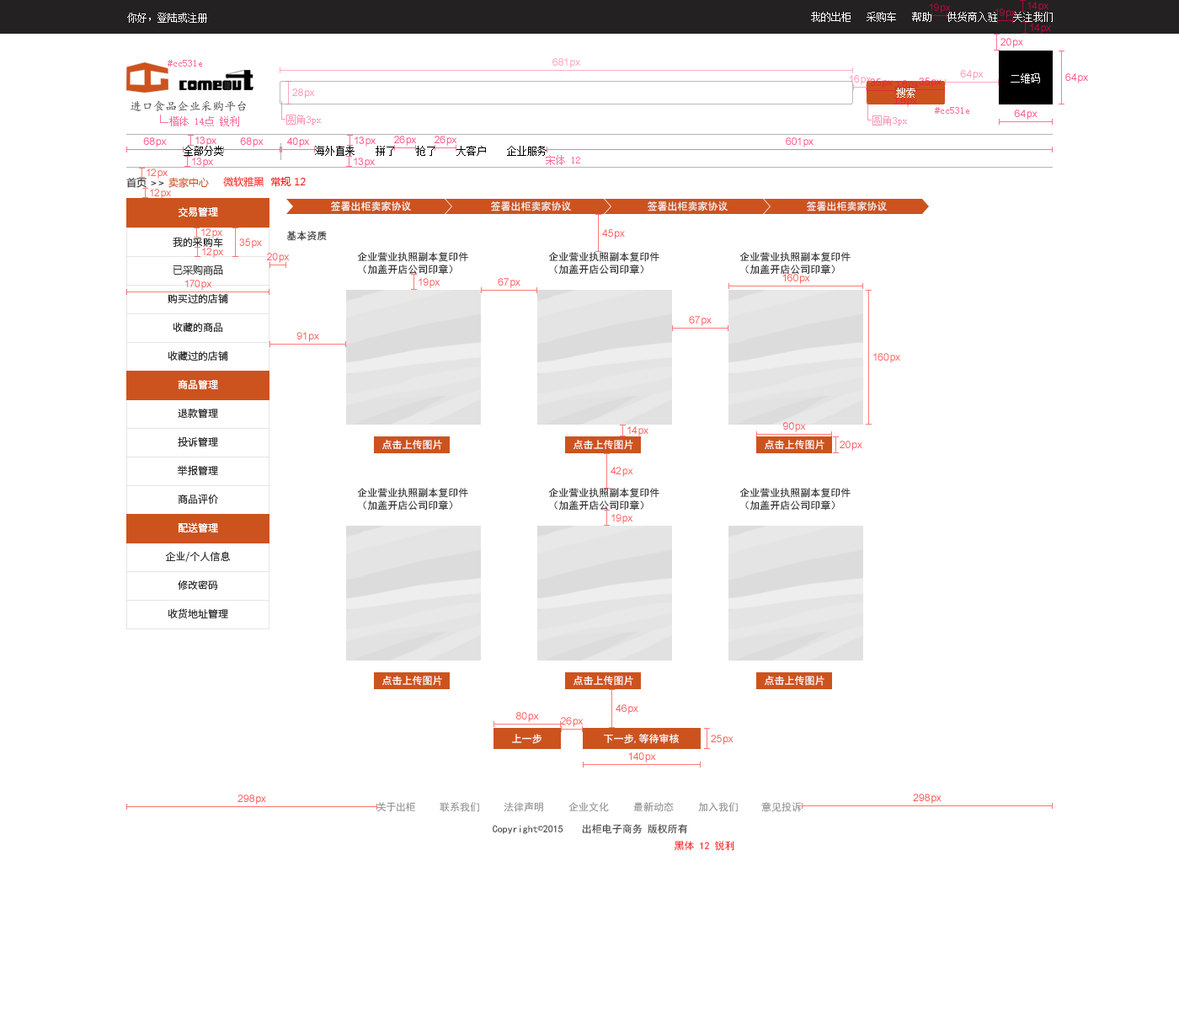
<style>
.page{position:relative;width:1179px;height:1011px;background:#ffffff}
.page>*{position:absolute;margin:0}
.t1{font:10.1px "SimSun";color:#ffffff}
.t2{font:10.1px "SimSun";color:#fc6f9a}
.t3{font:11.8px "¿¬Ìå";color:#464343}
.t4{font:10.1px "SimSun";color:#000000}
.t5{font:10.1px "MicrosoftYaHei";color:#cc531e}
.t6{font:10.1px "MicrosoftYaHei";color:#2a2a2a}
.t7{font:10.1px "MicrosoftYaHei";color:#333333}
.t8{font:10.1px "MicrosoftYaHei";color:#ff1111}
.t9{font:10.1px "SourceHanSansCN-Normal";color:#ffffff}
.t10{font:10.1px "SimHei";color:#fafafa}
.t11{font:10.1px "SimHei";color:#f4f4f4}
.t12{font:10.1px "SimHei";color:#282828}
.t13{font:10.1px "SourceHanSansCN-Normal";color:#333333}
.t14{font:10.1px "SimHei";color:#282727}
.t15{font:10.1px "SourceHanSansCN-Normal";color:#fefefe}
.t16{font:10.1px "SimHei";color:#ffffff}
.t17{font:10.1px "SimHei";color:#959595}
.t18{font:10.1px "SimHei";color:#434343}
.t19{font:10.1px "SimSun";color:#434343}
.t20{font:10.1px "SimHei";color:#ff2222}
</style>
<div class="page">
<p class="t1" style="left:127px;top:13px;width:80px;height:10px">你好，登陆或注册</p>
<p class="t1" style="left:811px;top:12px;width:242px;height:10px">我的出柜   采购车   帮助   供货商入驻   关注我们</p>
<p class="t2" style="left:168px;top:60px;width:34px;height:7px">#cc531e</p>
<p class="t1" style="left:1011px;top:73px;width:29px;height:10px">二维码</p>
<p class="t1" style="left:896px;top:88px;width:20px;height:10px">搜索</p>
<p class="t3" style="left:130px;top:100px;width:116px;height:12px">进口食品企业采购平台</p>
<p class="t2" style="left:935px;top:107px;width:35px;height:7px">#cc531e</p>
<p class="t4" style="left:184px;top:146px;width:39px;height:10px">全部分类</p>
<p class="t4" style="left:315px;top:146px;width:232px;height:10px">海外直来    拼了    抢了    大客户    企业服务</p>
<p class="t2" style="left:546px;top:155px;width:34px;height:10px">宋体 12</p>
<p class="t5" style="left:126px;top:177px;width:83px;height:11px"><span class="t6">首页 </span><span class="t7">&gt;&gt; </span>卖家中心</p>
<p class="t8" style="left:223px;top:176px;width:83px;height:11px">微软雅黑  常规 12</p>
<p class="t9" style="left:179px;top:206px;width:39px;height:11px">交易管理</p>
<p class="t10" style="left:331px;top:201px;width:80px;height:10px">签署出柜卖家协议</p>
<p class="t11" style="left:491px;top:201px;width:80px;height:10px">签署出柜卖家协议</p>
<p class="t11" style="left:648px;top:201px;width:80px;height:10px">签署出柜卖家协议</p>
<p class="t11" style="left:807px;top:201px;width:80px;height:10px">签署出柜卖家协议</p>
<p class="t12" style="left:286px;top:231px;width:41px;height:10px">基本资质</p>
<p class="t13" style="left:173px;top:237px;width:50px;height:11px">我的采购车</p>
<p class="t14" style="left:357px;top:252px;width:111px;height:23px;text-align:right">企业营业执照副本复印件<br>（加盖开店公司印章）</p>
<p class="t14" style="left:548px;top:252px;width:112px;height:23px;text-align:right">企业营业执照副本复印件<br>（加盖开店公司印章）</p>
<p class="t14" style="left:740px;top:252px;width:111px;height:23px;text-align:right">企业营业执照副本复印件<br>（加盖开店公司印章）</p>
<p class="t7" style="left:173px;top:265px;width:50px;height:10px">已采购商品</p>
<p class="t13" style="left:168px;top:293px;width:60px;height:10px">购买过的店铺</p>
<p class="t13" style="left:173px;top:322px;width:50px;height:10px">收藏的商品</p>
<p class="t13" style="left:168px;top:350px;width:60px;height:11px">收藏过的店铺</p>
<p class="t15" style="left:178px;top:379px;width:40px;height:10px">商品管理</p>
<p class="t13" style="left:178px;top:408px;width:40px;height:10px">退款管理</p>
<p class="t13" style="left:178px;top:436px;width:40px;height:11px">投诉管理</p>
<p class="t16" style="left:382px;top:440px;width:60px;height:10px">点击上传图片</p>
<p class="t16" style="left:574px;top:440px;width:60px;height:10px">点击上传图片</p>
<p class="t16" style="left:765px;top:440px;width:60px;height:10px">点击上传图片</p>
<p class="t13" style="left:178px;top:465px;width:40px;height:11px">举报管理</p>
<p class="t13" style="left:178px;top:494px;width:40px;height:11px">商品评价</p>
<p class="t14" style="left:357px;top:488px;width:111px;height:23px;text-align:right">企业营业执照副本复印件<br>（加盖开店公司印章）</p>
<p class="t14" style="left:548px;top:488px;width:112px;height:23px;text-align:right">企业营业执照副本复印件<br>（加盖开店公司印章）</p>
<p class="t14" style="left:740px;top:488px;width:111px;height:23px;text-align:right">企业营业执照副本复印件<br>（加盖开店公司印章）</p>
<p class="t15" style="left:178px;top:522px;width:40px;height:10px">配送管理</p>
<p class="t13" style="left:165px;top:551px;width:65px;height:11px">企业/个人信息</p>
<p class="t13" style="left:178px;top:580px;width:40px;height:10px">修改密码</p>
<p class="t13" style="left:168px;top:608px;width:60px;height:11px">收货地址管理</p>
<p class="t16" style="left:382px;top:676px;width:60px;height:10px">点击上传图片</p>
<p class="t16" style="left:574px;top:676px;width:60px;height:10px">点击上传图片</p>
<p class="t16" style="left:765px;top:676px;width:60px;height:10px">点击上传图片</p>
<p class="t16" style="left:512px;top:734px;width:31px;height:10px">上一步</p>
<p class="t16" style="left:604px;top:734px;width:75px;height:10px">下一步,等待审核</p>
<p class="t17" style="left:377px;top:802px;width:39px;height:10px">关于出柜</p>
<p class="t17" style="left:440px;top:802px;width:39px;height:10px">联系我们</p>
<p class="t17" style="left:504px;top:802px;width:39px;height:10px">法律声明</p>
<p class="t17" style="left:569px;top:802px;width:40px;height:10px">企业文化</p>
<p class="t17" style="left:634px;top:802px;width:40px;height:10px">最新动态</p>
<p class="t17" style="left:698px;top:802px;width:40px;height:10px">加入我们</p>
<p class="t17" style="left:762px;top:802px;width:40px;height:10px">意见投诉</p>
<p class="t18" style="left:493px;top:825px;width:71px;height:9px">Copyright<span class="t19">©</span>2015</p>
<p class="t18" style="left:582px;top:824px;width:61px;height:10px">出柜电子商务</p>
<p class="t18" style="left:648px;top:824px;width:39px;height:10px">版权所有</p>
<p class="t20" style="left:674px;top:841px;width:61px;height:10px">黑体 12 锐利</p>
</div>
